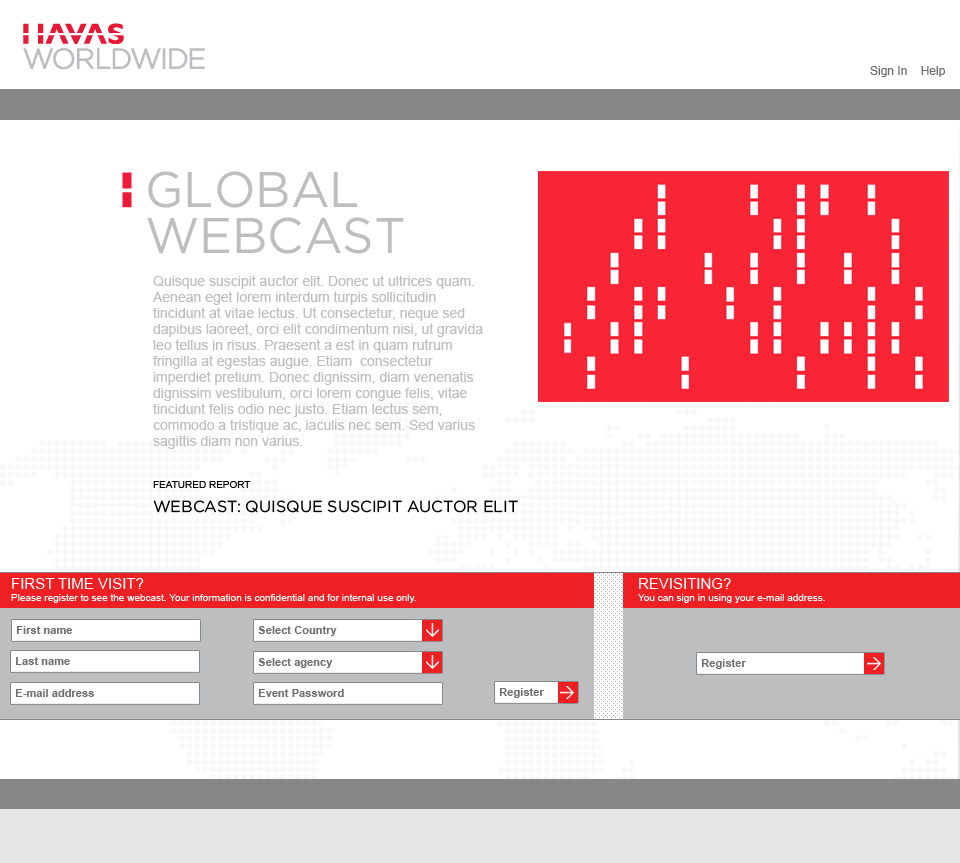
<style>
.page{position:relative;width:960px;height:863px;background:#ffffff}
.page>*{position:absolute;margin:0}
.t1{font:12px "ArialMT";color:#6e6e6e}
.t2{font:50px/46px "Gotham-Book";color:#bcbec0}
.t3{font:14px/16px "ArialMT";color:#bcbec0}
.t4{font:10px "ArialMT";color:#000000}
.t5{font:16px "Gotham-Book";color:#000000;text-transform:uppercase}
.t6{font:10px/12px "ArialMT";color:#fefeff}
.t7{font:15px/12px "ArialMT";color:#fefeff;text-transform:uppercase}
.t8{font:11.1px "Arial-BoldMT";color:#6e6e6e}
</style>
<div class="page">
<p class="t1" style="left:870px;top:66px;width:75px;height:11px">Sign In    Help</p>
<p class="t2" style="left:147px;top:171px;width:257px;height:83px">GLOBAL<br>WEBCAST</p>
<p class="t3" style="left:153px;top:275px;width:330px;height:174px">Quisque suscipit auctor elit. Donec ut ultrices quam. Aenean eget lorem interdum turpis sollicitudin  tincidunt at vitae lectus. Ut consectetur, neque sed dapibus laoreet, orci elit condimentum nisi, ut gravida leo tellus in risus. Praesent a est in quam rutrum fringilla at egestas augue. Etiam  consectetur imperdiet pretium. Donec dignissim, diam venenatis dignissim vestibulum, orci lorem congue felis, vitae tincidunt felis odio nec justo. Etiam lectus sem, commodo a tristique ac, iaculis nec sem. Sed varius sagittis diam non varius.</p>
<p class="t4" style="left:153px;top:481px;width:98px;height:7px">FEATURED REPORT</p>
<p class="t5" style="left:153px;top:500px;width:365px;height:13px">WEBCAST: Quisque suscipit auctor elit</p>
<p class="t6" style="left:11px;top:578px;width:405px;height:25px"><span class="t7">First time visit? <br></span>Please register to see the webcast. Your information is confidential and for internal use only.</p>
<p class="t6" style="left:638px;top:578px;width:187px;height:25px"><span class="t7">REVISITING?<br></span>You can sign in using your e-mail address.</p>
<p class="t8" style="left:16px;top:626px;width:56px;height:8px">First name</p>
<p class="t8" style="left:258px;top:626px;width:79px;height:10px">Select Country</p>
<p class="t8" style="left:16px;top:657px;width:54px;height:8px">Last name</p>
<p class="t8" style="left:258px;top:658px;width:75px;height:10px">Select agency</p>
<p class="t8" style="left:701px;top:659px;width:45px;height:10px">Register</p>
<p class="t8" style="left:15px;top:689px;width:79px;height:8px">E-mail address</p>
<p class="t8" style="left:258px;top:689px;width:86px;height:8px">Event Password</p>
<p class="t8" style="left:499px;top:688px;width:45px;height:10px">Register</p>
</div>
